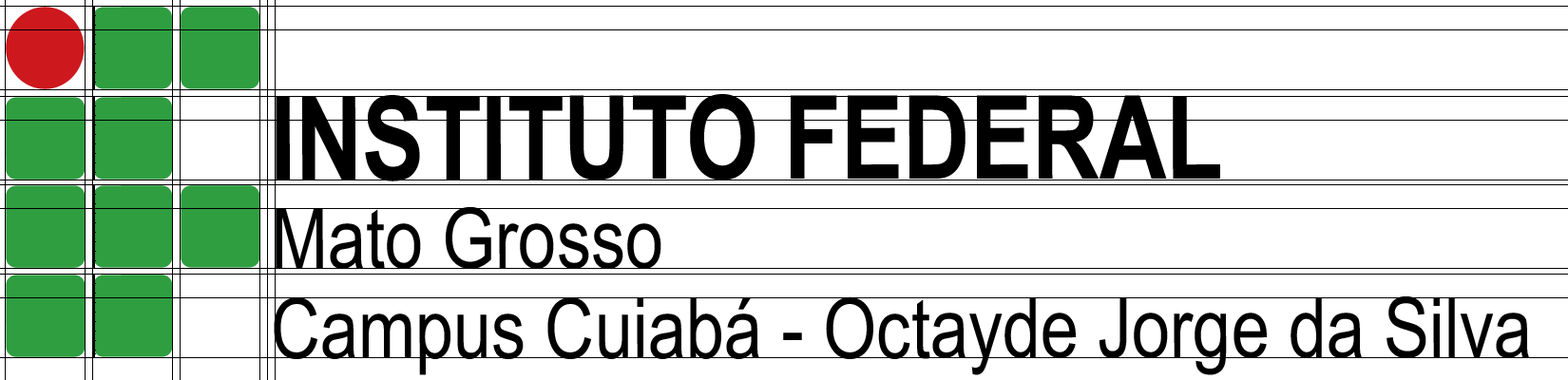
<style>
.page{position:relative;width:1568px;height:380px;background:#ffffff}
.page>*{position:absolute;margin:0}
.t1{font:115.9px "ArialNarrow-Bold";color:#000000}
.t2{font:83.6px "ArialNarrow";color:#000000}
</style>
<div class="page">
<p class="t1" style="left:276px;top:94px;width:944px;height:88px">INSTITUTO FEDERAL</p>
<p class="t2" style="left:276px;top:207px;width:385px;height:62px">Mato Grosso</p>
<p class="t2" style="left:274px;top:296px;width:1255px;height:79px">Campus Cuiabá - Octayde Jorge da Silva</p>
</div>
